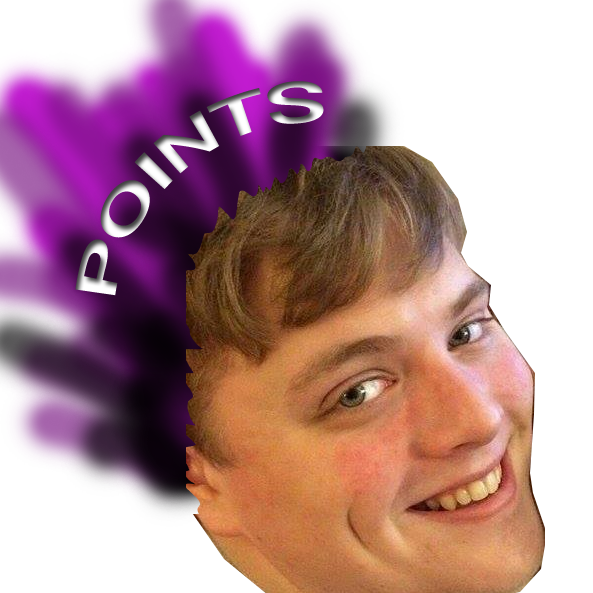
<style>
.page{position:relative;width:593px;height:593px;background:#ffffff}
.page>*{position:absolute;margin:0}
.t1{font:60px "Gautami-Bold"}
</style>
<div class="page">
<p class="t1" style="left:75px;top:81px;width:249px;height:215px;rotate:-40deg">POINTS</p>
</div>
